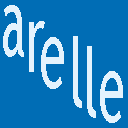
<style>
.page{position:relative;width:128px;height:128px;background:#006db5}
.page>*{position:absolute;margin:0}
.t1{font:96px "TrebuchetMS";letter-spacing:0.025em;color:#e4f3fd;scale:0.5 1}
</style>
<div class="page">
<p class="t1" style="left:3px;top:5px;width:21px;height:52px">a</p>
<p class="t1" style="left:29px;top:21px;width:16px;height:51px">r</p>
<p class="t1" style="left:41px;top:37px;width:23px;height:52px">e</p>
<p class="t1" style="left:73px;top:36px;width:9px;height:72px">l</p>
<p class="t1" style="left:87px;top:46px;width:9px;height:72px">l</p>
<p class="t1" style="left:100px;top:71px;width:23px;height:52px">e</p>
</div>
